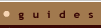
<style>
.page{position:relative;width:101px;height:28px;background:#a1794e}
.page>*{position:absolute;margin:0}
.t1{font:10.1px "TrebuchetMS-Bold";letter-spacing:0.05em;color:#3a0704;scale:1.1 1}
</style>
<div class="page">
<p class="t1" style="left:18px;top:10px;width:75px;height:10px">g  u  i  d  e  s</p>
</div>
